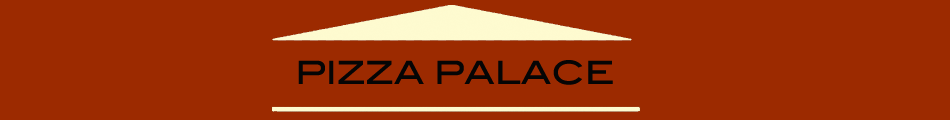
<style>
.page{position:relative;width:950px;height:120px;background:#9c2a00}
.page>*{position:absolute;margin:0}
.t1{font:32px "BlairMdITCTTMedium";color:#050505}
</style>
<div class="page">
<p class="t1" style="left:298px;top:60px;width:315px;height:25px">PIZZA PALACE</p>
</div>
